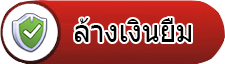
<style>
.page{position:relative;width:225px;height:64px;background:#ffffff}
.page>*{position:absolute;margin:0}
.t1{font:31.5px "Tahoma";color:#000000;scale:0.91 1}
</style>
<div class="page">
<p class="t1" style="left:75px;top:18px;width:116px;height:24px">ล้างเงินยืม</p>
</div>
